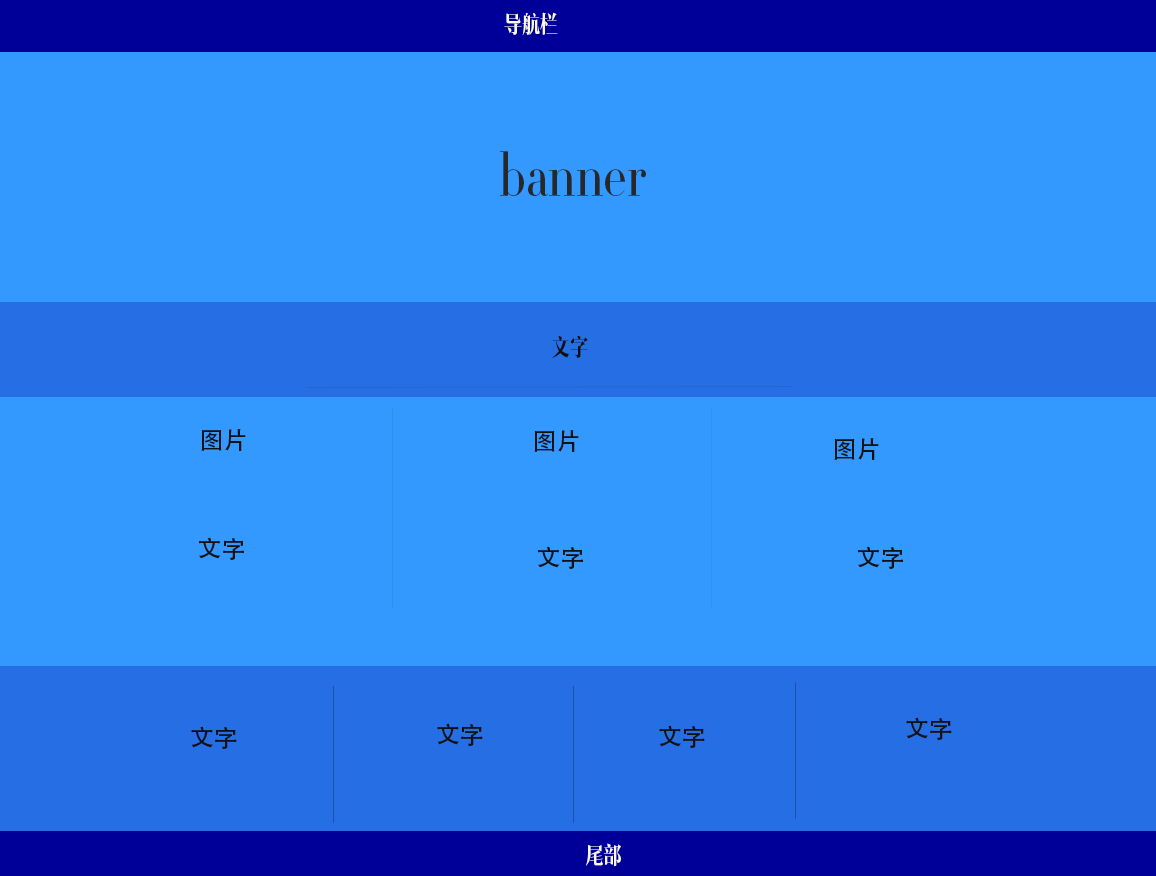
<style>
.page{position:relative;width:1156px;height:876px;background:#3399fe}
.page>*{position:absolute;margin:0}
.t1{font:24px "RTWSJyunYaDemo-Regular";color:#fdf9f2}
.t2{font:60px "RTWSJyunYaDemo-Regular";color:#282828}
.t3{font:24px "RTWSJyunYaDemo-Regular";color:#111111}
.t4{font:24px "AdobeHeitiStd-Regular";color:#111111}
</style>
<div class="page">
<p class="t1" style="left:504px;top:12px;width:54px;height:23px">导航栏</p>
<p class="t2" style="left:500px;top:151px;width:146px;height:45px">banner</p>
<p class="t3" style="left:552px;top:336px;width:36px;height:22px">文字</p>
<p class="t4" style="left:201px;top:428px;width:45px;height:23px">图片</p>
<p class="t4" style="left:534px;top:429px;width:45px;height:23px">图片</p>
<p class="t4" style="left:834px;top:437px;width:45px;height:23px">图片</p>
<p class="t4" style="left:199px;top:537px;width:45px;height:24px">文字</p>
<p class="t4" style="left:538px;top:546px;width:45px;height:24px">文字</p>
<p class="t4" style="left:858px;top:546px;width:45px;height:24px">文字</p>
<p class="t4" style="left:191px;top:726px;width:46px;height:24px">文字</p>
<p class="t4" style="left:437px;top:723px;width:46px;height:24px">文字</p>
<p class="t4" style="left:659px;top:725px;width:46px;height:24px">文字</p>
<p class="t4" style="left:906px;top:717px;width:46px;height:24px">文字</p>
<p class="t1" style="left:586px;top:843px;width:35px;height:24px">尾部</p>
</div>
